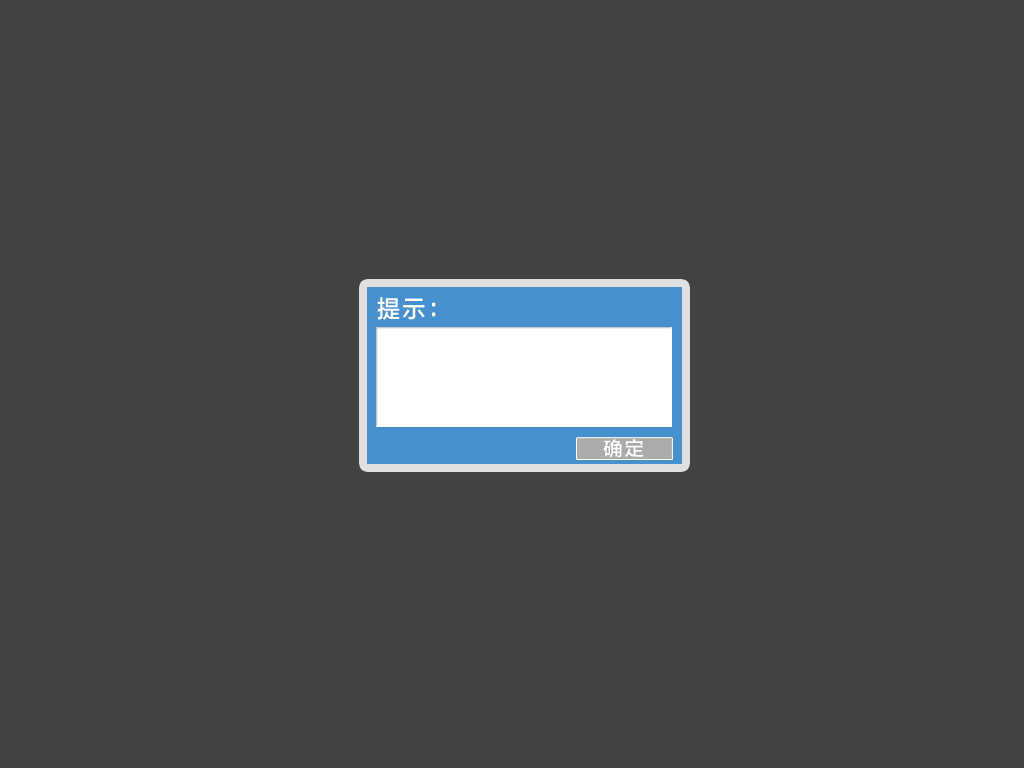
<style>
.page{position:relative;width:1024px;height:768px;background:#424243}
.page>*{position:absolute;margin:0}
.t1{font:24.1px "FZLTZHK--GBK1-0";letter-spacing:0.1em;color:#ffffff;scale:0.96 1}
.t2{font:19px "FZLTZHK--GBK1-0";letter-spacing:0.1em;color:#ffffff}
</style>
<div class="page">
<p class="t1" style="left:377px;top:297px;width:59px;height:23px">提示：</p>
<p class="t2" style="left:603px;top:439px;width:41px;height:19px">确定</p>
</div>
